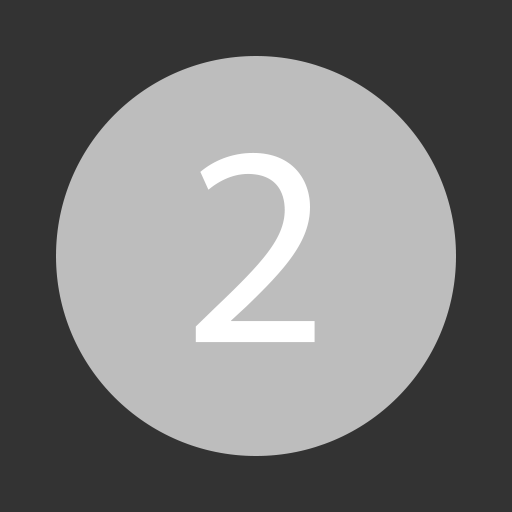
<style>
.page{position:relative;width:512px;height:512px;background:#333333}
.page>*{position:absolute;margin:0}
.t1{font:286px "MyriadPro-Regular";color:#ffffff}
</style>
<div class="page">
<p class="t1" style="left:195px;top:152px;width:120px;height:191px">2</p>
</div>
